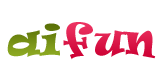
<style>
.page{position:relative;width:160px;height:80px;background:#ffffff}
.page>*{position:absolute;margin:0}
.t1{font:40px "Ravie";color:#799318}
.t2{font:40px "Ravie";color:#db1949}
</style>
<div class="page">
<p class="t1" style="left:7px;top:23px;width:53px;height:34px">ai</p>
<p class="t2" style="left:63px;top:22px;width:93px;height:38px">fun</p>
</div>
